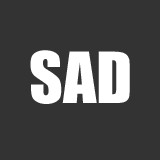
<style>
.page{position:relative;width:160px;height:160px;background:#333333}
.page>*{position:absolute;margin:0}
.t1{font:65.3px "Impact";color:#ffffff;text-transform:uppercase}
</style>
<div class="page">
<p class="t1" style="left:30px;top:50px;width:100px;height:54px">SAD</p>
</div>
